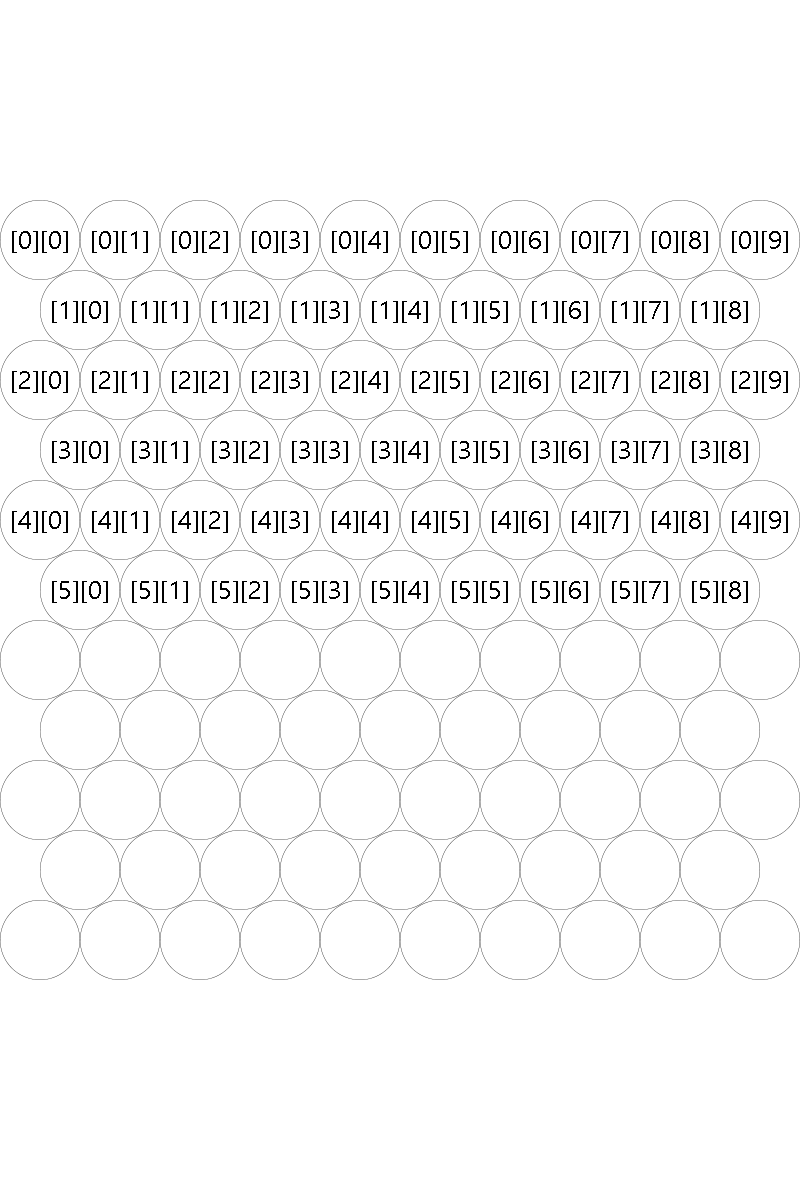
<style>
.page{position:relative;width:800px;height:1200px;background:#ffffff}
.page>*{position:absolute;margin:0}
.t1{font:25px "MalgunGothic";color:#000000}
</style>
<div class="page">
<p class="t1" style="left:12px;top:231px;width:56px;height:22px">[0][0]</p>
<p class="t1" style="left:92px;top:231px;width:56px;height:22px">[0][1]</p>
<p class="t1" style="left:172px;top:231px;width:56px;height:22px">[0][2]</p>
<p class="t1" style="left:252px;top:231px;width:56px;height:22px">[0][3]</p>
<p class="t1" style="left:332px;top:231px;width:56px;height:22px">[0][4]</p>
<p class="t1" style="left:412px;top:231px;width:56px;height:22px">[0][5]</p>
<p class="t1" style="left:492px;top:231px;width:56px;height:22px">[0][6]</p>
<p class="t1" style="left:572px;top:231px;width:56px;height:22px">[0][7]</p>
<p class="t1" style="left:652px;top:231px;width:56px;height:22px">[0][8]</p>
<p class="t1" style="left:732px;top:231px;width:56px;height:22px">[0][9]</p>
<p class="t1" style="left:52px;top:301px;width:56px;height:22px">[1][0]</p>
<p class="t1" style="left:132px;top:301px;width:56px;height:22px">[1][1]</p>
<p class="t1" style="left:212px;top:301px;width:56px;height:22px">[1][2]</p>
<p class="t1" style="left:292px;top:301px;width:56px;height:22px">[1][3]</p>
<p class="t1" style="left:372px;top:301px;width:56px;height:22px">[1][4]</p>
<p class="t1" style="left:452px;top:301px;width:56px;height:22px">[1][5]</p>
<p class="t1" style="left:532px;top:301px;width:56px;height:22px">[1][6]</p>
<p class="t1" style="left:612px;top:301px;width:56px;height:22px">[1][7]</p>
<p class="t1" style="left:692px;top:301px;width:56px;height:22px">[1][8]</p>
<p class="t1" style="left:12px;top:371px;width:56px;height:22px">[2][0]</p>
<p class="t1" style="left:92px;top:371px;width:56px;height:22px">[2][1]</p>
<p class="t1" style="left:172px;top:371px;width:56px;height:22px">[2][2]</p>
<p class="t1" style="left:252px;top:371px;width:56px;height:22px">[2][3]</p>
<p class="t1" style="left:332px;top:371px;width:56px;height:22px">[2][4]</p>
<p class="t1" style="left:412px;top:371px;width:56px;height:22px">[2][5]</p>
<p class="t1" style="left:492px;top:371px;width:56px;height:22px">[2][6]</p>
<p class="t1" style="left:572px;top:371px;width:56px;height:22px">[2][7]</p>
<p class="t1" style="left:652px;top:371px;width:56px;height:22px">[2][8]</p>
<p class="t1" style="left:732px;top:371px;width:56px;height:22px">[2][9]</p>
<p class="t1" style="left:52px;top:441px;width:56px;height:22px">[3][0]</p>
<p class="t1" style="left:132px;top:441px;width:56px;height:22px">[3][1]</p>
<p class="t1" style="left:212px;top:441px;width:56px;height:22px">[3][2]</p>
<p class="t1" style="left:292px;top:441px;width:56px;height:22px">[3][3]</p>
<p class="t1" style="left:372px;top:441px;width:56px;height:22px">[3][4]</p>
<p class="t1" style="left:452px;top:441px;width:56px;height:22px">[3][5]</p>
<p class="t1" style="left:532px;top:441px;width:56px;height:22px">[3][6]</p>
<p class="t1" style="left:612px;top:441px;width:56px;height:22px">[3][7]</p>
<p class="t1" style="left:692px;top:441px;width:56px;height:22px">[3][8]</p>
<p class="t1" style="left:12px;top:511px;width:56px;height:22px">[4][0]</p>
<p class="t1" style="left:92px;top:511px;width:56px;height:22px">[4][1]</p>
<p class="t1" style="left:172px;top:511px;width:56px;height:22px">[4][2]</p>
<p class="t1" style="left:252px;top:511px;width:56px;height:22px">[4][3]</p>
<p class="t1" style="left:332px;top:511px;width:56px;height:22px">[4][4]</p>
<p class="t1" style="left:412px;top:511px;width:56px;height:22px">[4][5]</p>
<p class="t1" style="left:492px;top:511px;width:56px;height:22px">[4][6]</p>
<p class="t1" style="left:572px;top:511px;width:56px;height:22px">[4][7]</p>
<p class="t1" style="left:652px;top:511px;width:56px;height:22px">[4][8]</p>
<p class="t1" style="left:732px;top:511px;width:56px;height:22px">[4][9]</p>
<p class="t1" style="left:52px;top:581px;width:56px;height:22px">[5][0]</p>
<p class="t1" style="left:132px;top:581px;width:56px;height:22px">[5][1]</p>
<p class="t1" style="left:212px;top:581px;width:56px;height:22px">[5][2]</p>
<p class="t1" style="left:292px;top:581px;width:56px;height:22px">[5][3]</p>
<p class="t1" style="left:372px;top:581px;width:56px;height:22px">[5][4]</p>
<p class="t1" style="left:452px;top:581px;width:56px;height:22px">[5][5]</p>
<p class="t1" style="left:532px;top:581px;width:56px;height:22px">[5][6]</p>
<p class="t1" style="left:612px;top:581px;width:56px;height:22px">[5][7]</p>
<p class="t1" style="left:692px;top:581px;width:56px;height:22px">[5][8]</p>
</div>
